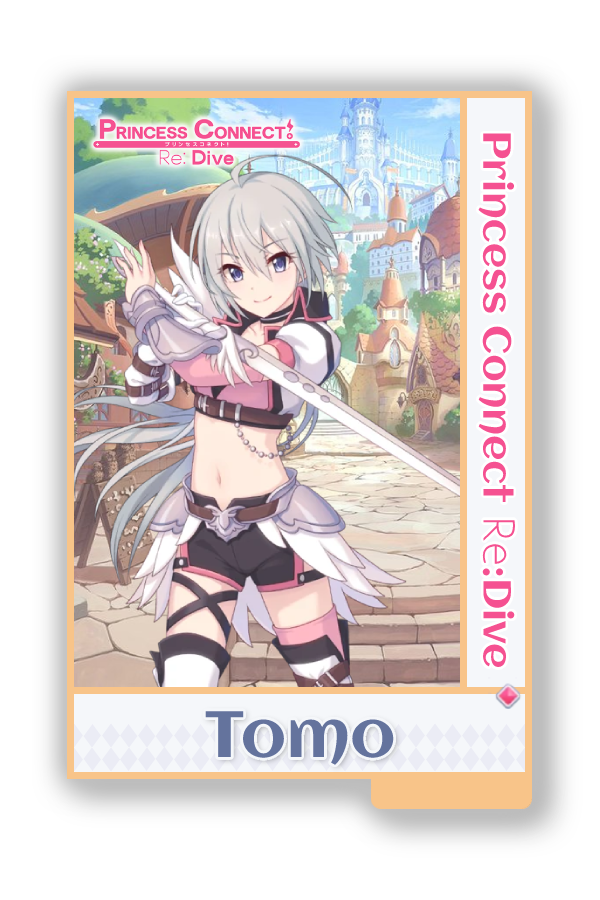
<style>
.page{position:relative;width:600px;height:900px;background:#ffffff}
.page>*{position:absolute;margin:0}
.t1{font:39px "Aclonica-Regular";color:#f55191}
.t2{font:39px "AaarghNormal";color:#f55191}
.t3{font:65px "Aclonica-Regular";color:#64739d}
</style>
<div class="page">
<p class="t1" style="left:478px;top:133px;width:38px;height:534px;rotate:90deg">Princess Connect <span class="t2">Re</span>:Dive</p>
<p class="t3" style="left:205px;top:711px;width:189px;height:54px">Tomo</p>
</div>
